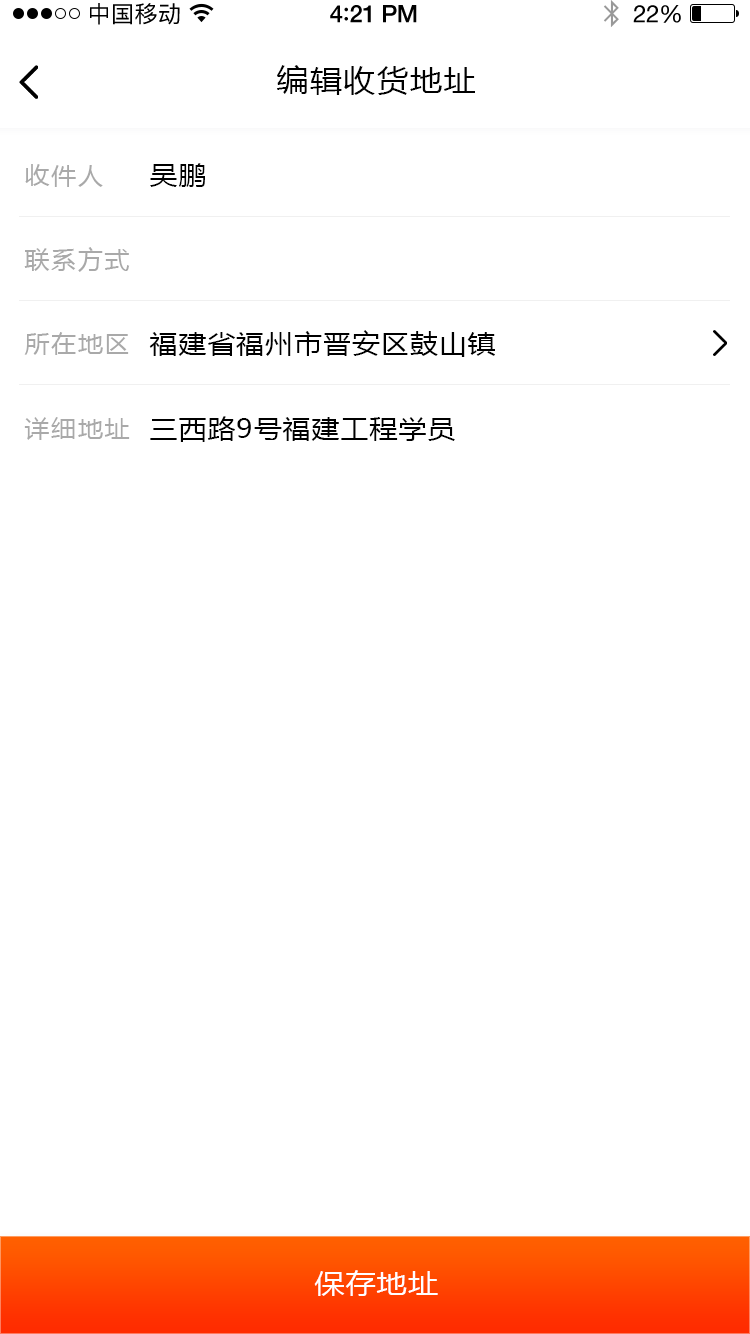
<style>
.page{position:relative;width:750px;height:1334px;background:#ffffff}
.page>*{position:absolute;margin:0}
.t1{font:23px "PingFangSC-Regular";letter-spacing:0.02em;color:#000000}
.t2{font:24px "HelveticaNeue-Medium";letter-spacing:-0.02em;color:#000000}
.t3{font:26px "Avenir-Medium";letter-spacing:-0.02em;color:#000000}
.t4{font:24px "HelveticaNeue";letter-spacing:-0.02em;color:#000000}
.t5{font:30px "MicrosoftYaHei";letter-spacing:0.05em;color:#000000;scale:1.06 1}
.t6{font:24px "MicrosoftYaHei";letter-spacing:0.05em;color:#a9a9a9;scale:1.06 1}
.t7{font:26px "MicrosoftYaHei";letter-spacing:0.05em;color:#000000;scale:1.06 1}
.t8{font:28px "MicrosoftYaHei";letter-spacing:0.05em;color:#ffffff;scale:1.06 1}
</style>
<div class="page">
<p class="t1" style="left:90px;top:3px;width:90px;height:22px">中国移动</p>
<p class="t2" style="left:330px;top:5px;width:87px;height:18px">4<span class="t3">:</span>21 PM</p>
<p class="t4" style="left:633px;top:5px;width:48px;height:18px">22%</p>
<p class="t5" style="left:277px;top:65px;width:198px;height:30px">编辑收货地址</p>
<p class="t6" style="left:25px;top:164px;width:78px;height:23px">收件人</p>
<p class="t7" style="left:150px;top:163px;width:55px;height:24px">吴鹏</p>
<p class="t6" style="left:24px;top:247px;width:106px;height:25px">联系方式</p>
<p class="t6" style="left:24px;top:332px;width:105px;height:23px">所在地区</p>
<p class="t7" style="left:149px;top:330px;width:346px;height:27px">福建省福州市晋安区鼓山镇</p>
<p class="t6" style="left:24px;top:417px;width:106px;height:23px">详细地址</p>
<p class="t7" style="left:150px;top:416px;width:305px;height:26px">三西路9号福建工程学员</p>
<p class="t8" style="left:314px;top:1270px;width:124px;height:26px">保存地址</p>
</div>
